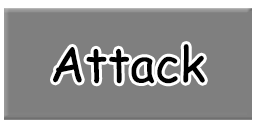
<style>
.page{position:relative;width:256px;height:128px;background:#7f7f7f}
.page>*{position:absolute;margin:0}
.t1{font:48px "ComicSansMS";color:#000000}
</style>
<div class="page">
<p class="t1" style="left:53px;top:44px;width:152px;height:40px">Attack</p>
</div>
